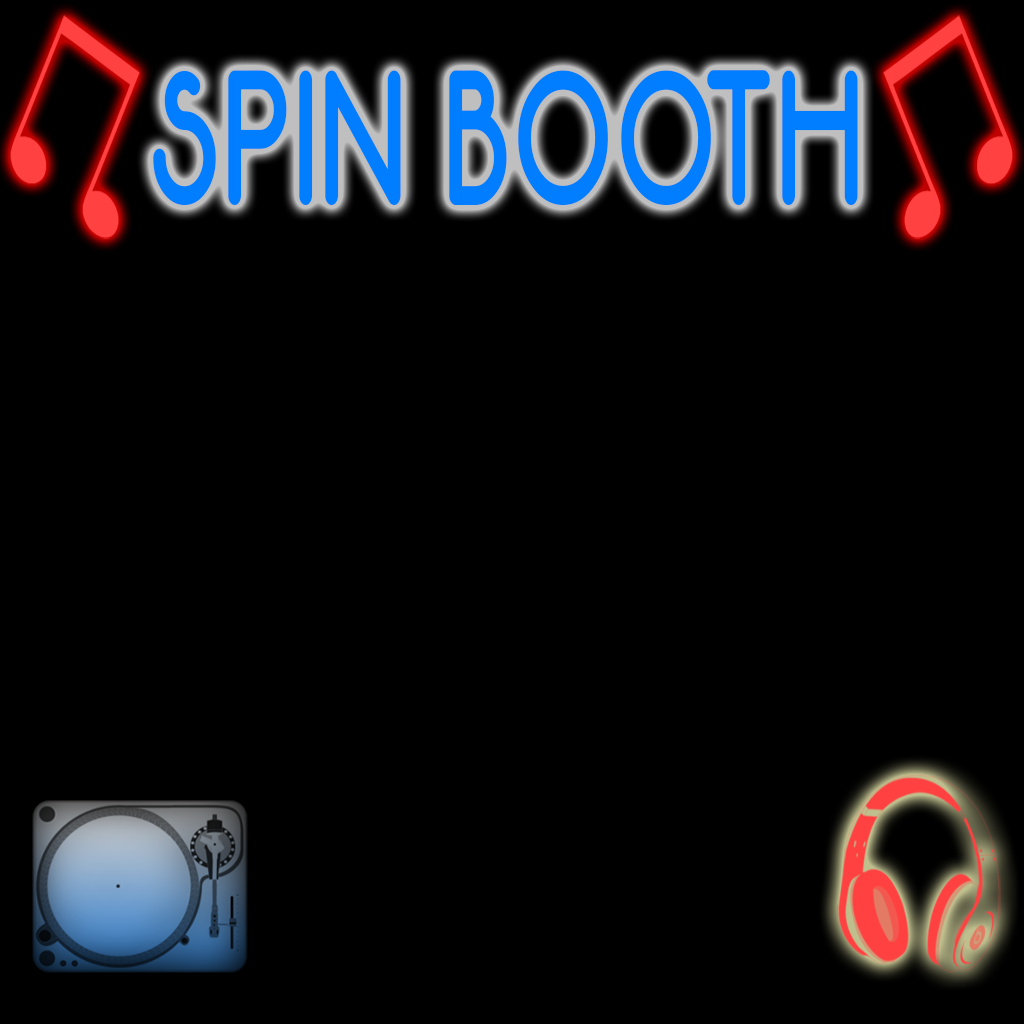
<style>
.page{position:relative;width:1024px;height:1024px;background:#000000}
.page>*{position:absolute;margin:0}
.t1{font:192px "Neon80s";color:#007eff;scale:0.67 1}
</style>
<div class="page">
<p class="t1" style="left:153px;top:70px;width:705px;height:135px">SPIN BOOTH</p>
</div>
